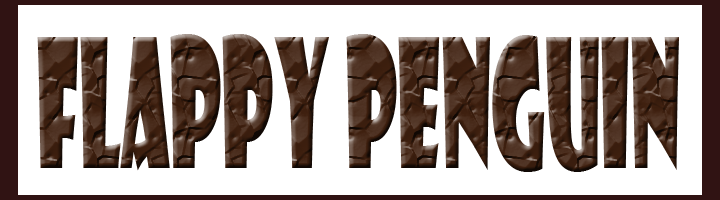
<style>
.page{position:relative;width:720px;height:200px;background:#ffffff}
.page>*{position:absolute;margin:0}
.t1{font:175.2px "ShowcardGothic-Reg";color:#3f200f;scale:0.45 1}
</style>
<div class="page">
<p class="t1" style="left:37px;top:34px;width:642px;height:138px">Flappy penguin</p>
</div>
